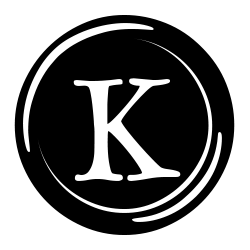
<style>
.page{position:relative;width:250px;height:250px;background:#ffffff}
.page>*{position:absolute;margin:0}
.t1{font:293.2px "TypeKeysFilled";letter-spacing:0.02em;color:#000000}
</style>
<div class="page">
<p class="t1" style="left:14px;top:15px;width:221px;height:220px">k</p>
</div>
